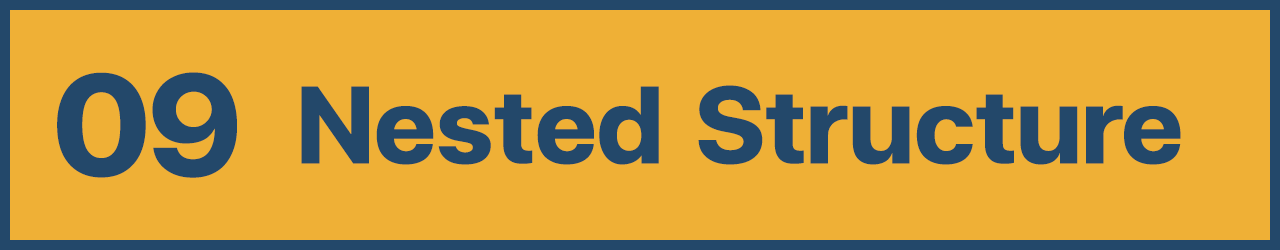
<style>
.page{position:relative;width:1280px;height:250px;background:#efb036}
.page>*{position:absolute;margin:0}
.t1{font:200px "FCMinimalBold";color:#23486a}
.t2{font:150px "FCMinimalBold";color:#23486a}
</style>
<div class="page">
<p class="t1" style="left:57px;top:72px;width:180px;height:106px">09</p>
<p class="t2" style="left:301px;top:85px;width:880px;height:80px">Nested Structure</p>
</div>
